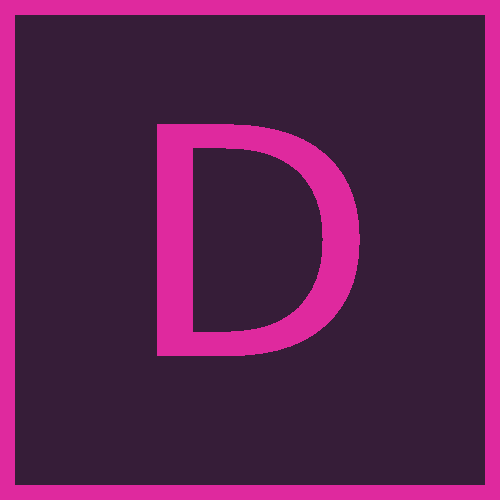
<style>
.page{position:relative;width:500px;height:500px;background:#361d38}
.page>*{position:absolute;margin:0}
.t1{font:315.8px "SourceHanSansSC-Regular";color:#df299e;scale:1.21 1}
</style>
<div class="page">
<p class="t1" style="left:156px;top:124px;width:204px;height:232px">D</p>
</div>
